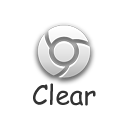
<style>
.page{position:relative;width:128px;height:128px;background:#ffffff}
.page>*{position:absolute;margin:0}
.t1{font:26.8px "ComicSansMS";color:#323232}
</style>
<div class="page">
<p class="t1" style="left:33px;top:83px;width:63px;height:23px">Clear</p>
</div>
